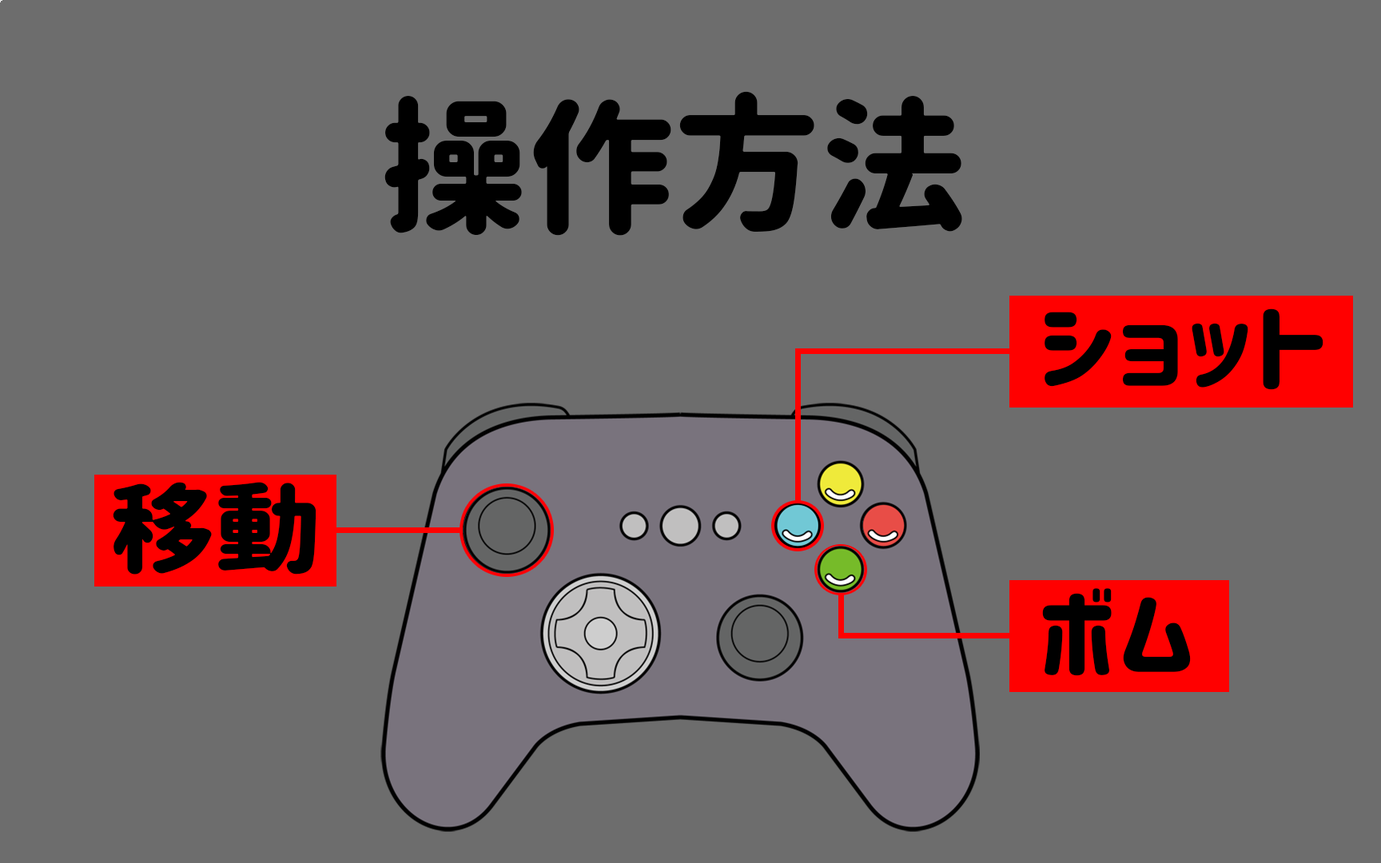
<style>
.page{position:relative;width:1381px;height:863px;background:#6d6d6d}
.page>*{position:absolute;margin:0}
.t1{font:146.6px "Corporate-Logo-Rounded";color:#000000}
.t2{font:98.2px "Corporate-Logo-Rounded";color:#000000;scale:1.08 1}
</style>
<div class="page">
<p class="t1" style="left:384px;top:91px;width:578px;height:145px">操作方法</p>
<p class="t2" style="left:1045px;top:309px;width:279px;height:81px">ショット</p>
<p class="t2" style="left:113px;top:482px;width:204px;height:93px">移動</p>
<p class="t2" style="left:1042px;top:588px;width:149px;height:88px">ボム</p>
</div>
